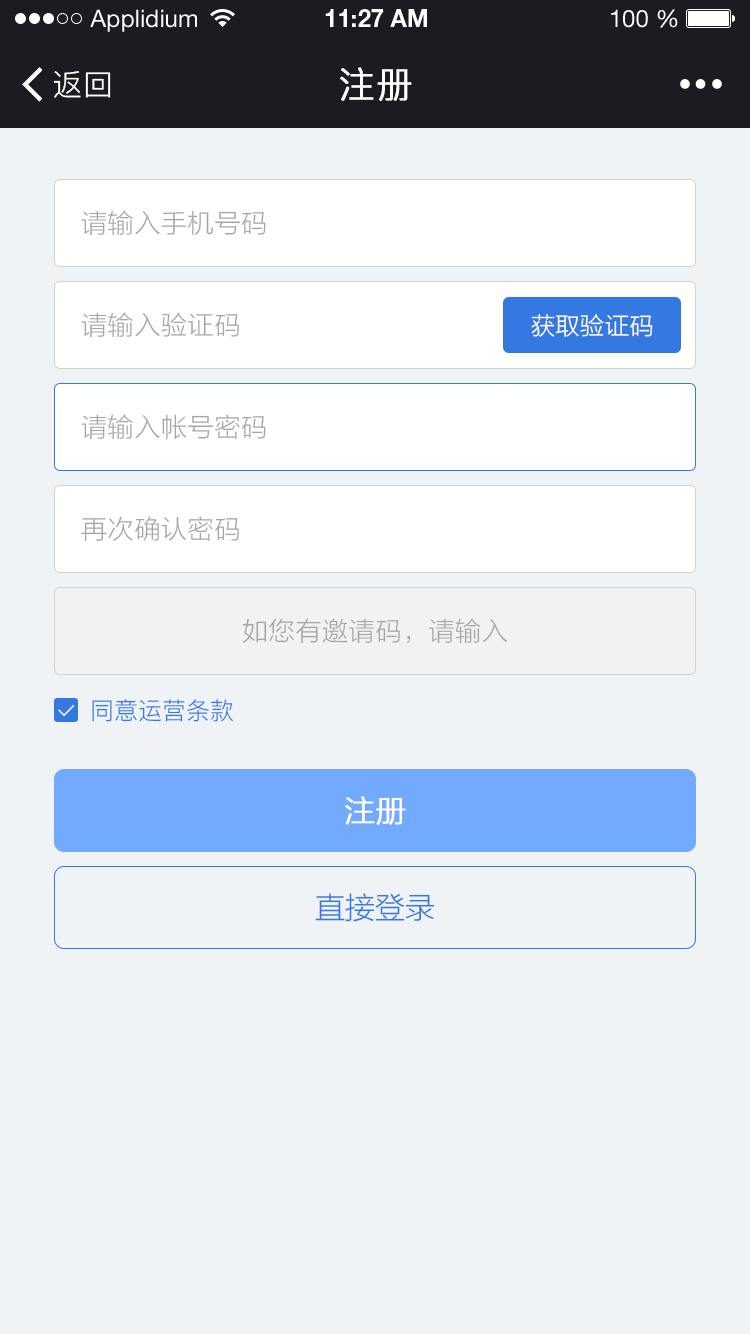
<style>
.page{position:relative;width:750px;height:1334px;background:#eff3f6}
.page>*{position:absolute;margin:0}
.t1{font:24px "HelveticaNeueLTStd-Roman";color:#ffffff}
.t2{font:24px "HelveticaNeueLTStd-Bd";color:#ffffff}
.t3{font:30px "PingFang-SC-Regular";letter-spacing:0.025em;color:#ffffff}
.t4{font:36px "PingFang-SC-Regular";letter-spacing:0.025em;color:#ffffff;font-weight:bold}
.t5{font:26px "FZLTXHK--GBK1-0";letter-spacing:0.025em;color:#a6a6a6}
.t6{font:24px "FZLTXHK--GBK1-0";letter-spacing:0.025em;color:#ffffff}
.t7{font:24px "PingFang-SC-Regular";color:#3479e1}
.t8{font:30px "FZLTXHK--GBK1-0";color:#ffffff;font-weight:bold}
.t9{font:30px "FZLTXHK--GBK1-0";color:#3479e1}
</style>
<div class="page">
<p class="t1" style="left:90px;top:9px;width:107px;height:23px">Applidium</p>
<p class="t2" style="left:325px;top:9px;width:102px;height:18px">11:27 AM</p>
<p class="t1" style="left:611px;top:9px;width:67px;height:19px">100 %</p>
<p class="t3" style="left:53px;top:71px;width:58px;height:27px">返回</p>
<p class="t4" style="left:340px;top:67px;width:72px;height:34px">注册</p>
<p class="t5" style="left:81px;top:210px;width:185px;height:25px">请输入手机号码</p>
<p class="t5" style="left:81px;top:312px;width:158px;height:25px">请输入验证码</p>
<p class="t6" style="left:531px;top:314px;width:122px;height:23px">获取验证码</p>
<p class="t5" style="left:81px;top:414px;width:185px;height:26px">请输入帐号密码</p>
<p class="t5" style="left:81px;top:516px;width:158px;height:26px">再次确认密码</p>
<p class="t5" style="left:242px;top:618px;width:266px;height:26px">如您有邀请码，请输入</p>
<p class="t7" style="left:92px;top:699px;width:141px;height:23px">同意运营条款</p>
<p class="t8" style="left:345px;top:796px;width:61px;height:29px">注册</p>
<p class="t9" style="left:315px;top:893px;width:120px;height:29px">直接登录</p>
</div>
